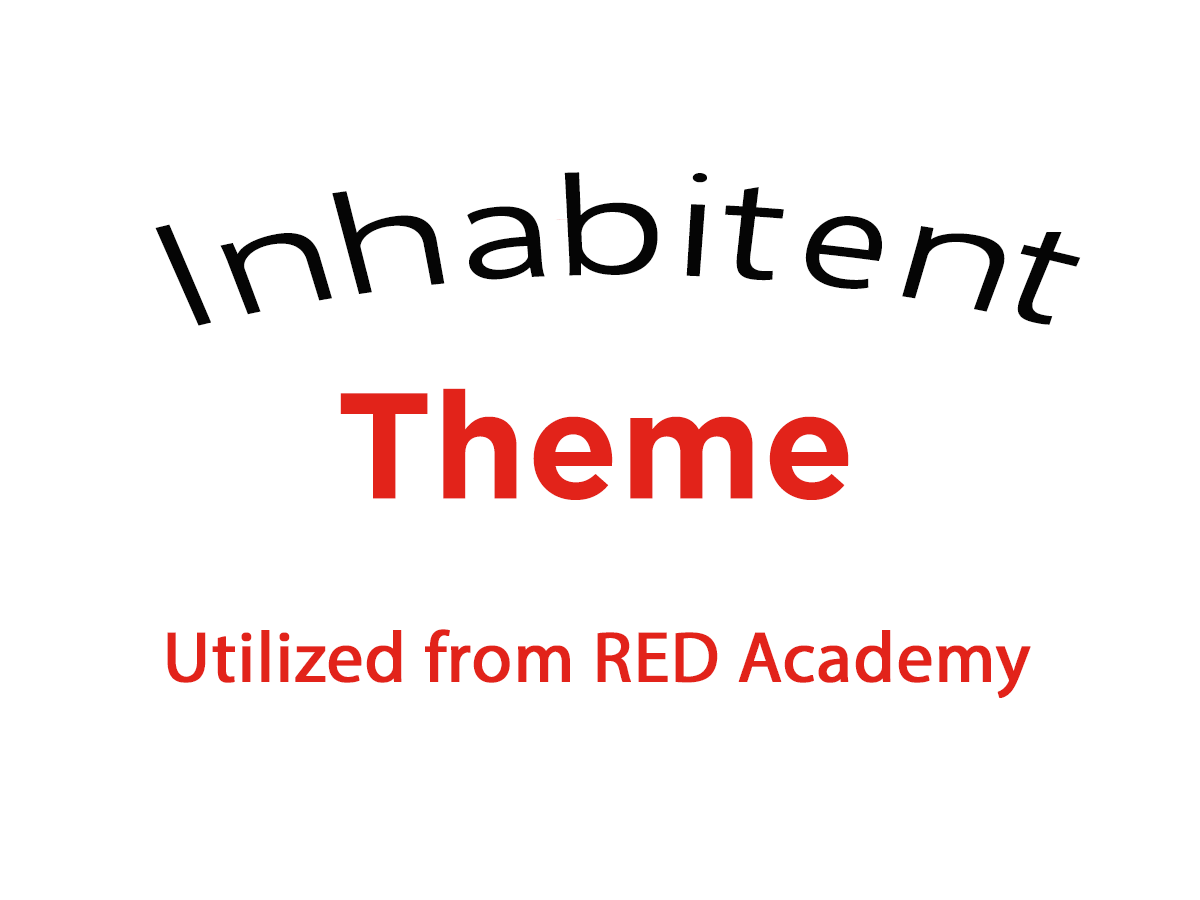
<style>
.page{position:relative;width:1200px;height:900px;background:#ffffff}
.page>*{position:absolute;margin:0}
.t1{font:145.4px "MyriadPro-Regular";color:#050505;scale:1.34 1}
.t2{font:72px "MyriadPro-Regular";color:#e2231a;font-weight:bold}
</style>
<div class="page">
<p class="t1" style="left:155px;top:172px;width:926px;height:154px">Inhabitent</p>
<p class="t2" style="left:167px;top:629px;width:864px;height:69px">Utilized from RED Academy</p>
</div>
